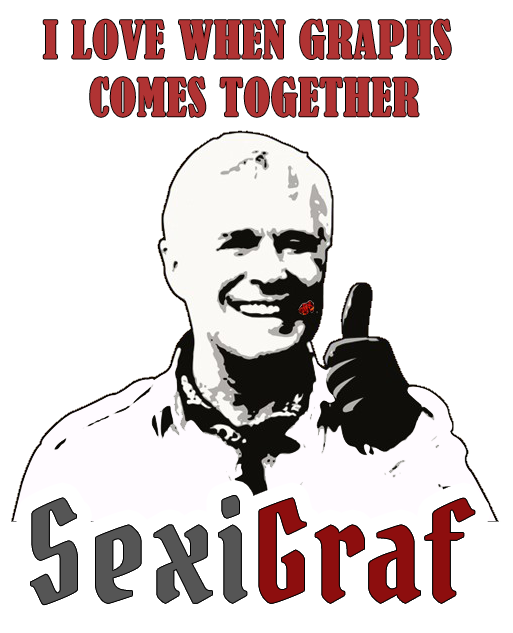
<style>
.page{position:relative;width:513px;height:633px;background:#ffffff}
.page>*{position:absolute;margin:0}
.t1{font:48px "BernardMT-Condensed";color:#b03333;text-transform:uppercase;font-weight:bold}
.t2{font:135px "PirataOne-Regular";letter-spacing:0.05em;color:#555555}
.t3{font:135px "PirataOne-Regular";letter-spacing:0.05em;color:#8d0e0e}
</style>
<div class="page">
<p class="t1" style="left:43px;top:19px;width:408px;height:98px;text-align:center">I Love When Graphs <br>comes together</p>
<p class="t2" style="left:31px;top:496px;width:216px;height:109px">Sexi</p>
<p class="t3" style="left:259px;top:498px;width:216px;height:105px">Graf</p>
</div>
